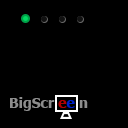
<style>
.page{position:relative;width:128px;height:128px;background:#000000}
.page>*{position:absolute;margin:0}
.t1{font:14px "Tahoma-Bold";color:#8d8d8d}
.t2{font:14px "Tahoma-Bold";color:#b10000}
.t3{font:14px "Tahoma-Bold";color:#0021c6}
</style>
<div class="page">
<p class="t1" style="left:10px;top:97px;width:78px;height:14px">BigScr <span class="t2">e</span><span class="t3">e</span> n</p>
</div>
